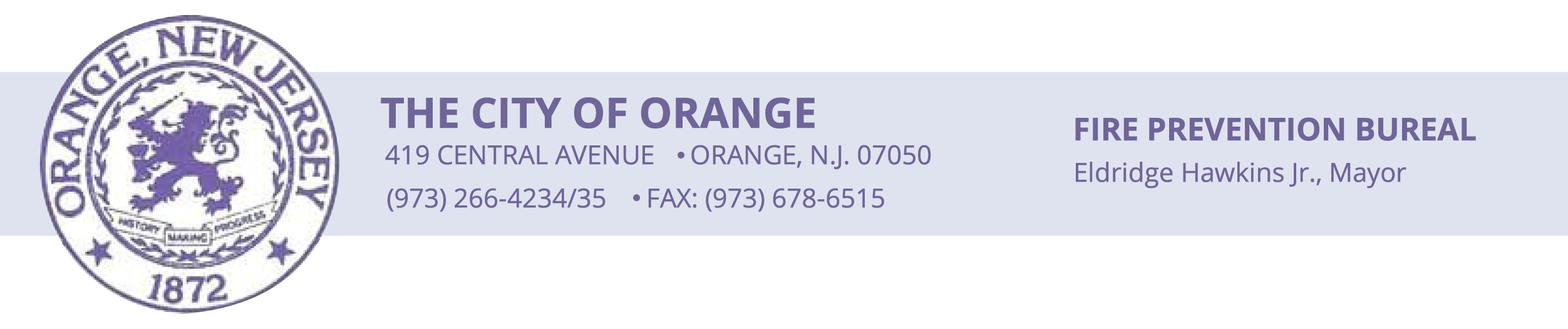
<style>
.page{position:relative;width:1568px;height:329px;background:#ffffff}
.page>*{position:absolute;margin:0}
.t1{font:41.7px "OpenSans-Bold";letter-spacing:-0.025em;color:#6f6599;font-weight:bold}
.t2{font:31.3px "OpenSans-Bold";letter-spacing:-0.025em;color:#6f6599;font-weight:bold}
.t3{font:26.1px "OpenSans";letter-spacing:-0.025em;color:#6f6599;font-weight:bold}
</style>
<div class="page">
<p class="t1" style="left:381px;top:97px;width:434px;height:31px">THE CITY OF ORANGE</p>
<p class="t2" style="left:1075px;top:117px;width:401px;height:24px">FIRE PREVENTION BUREAL</p>
<p class="t3" style="left:385px;top:145px;width:269px;height:20px">419 CENTRAL AVENUE</p>
<p class="t3" style="left:691px;top:145px;width:240px;height:24px">ORANGE, N.J. 07050</p>
<p class="t3" style="left:1076px;top:162px;width:330px;height:26px">Eldridge Hawkins Jr., Mayor</p>
<p class="t3" style="left:387px;top:188px;width:219px;height:24px">(973) 266-4234/35</p>
<p class="t3" style="left:648px;top:188px;width:236px;height:24px">FAX: (973) 678-6515</p>
</div>
